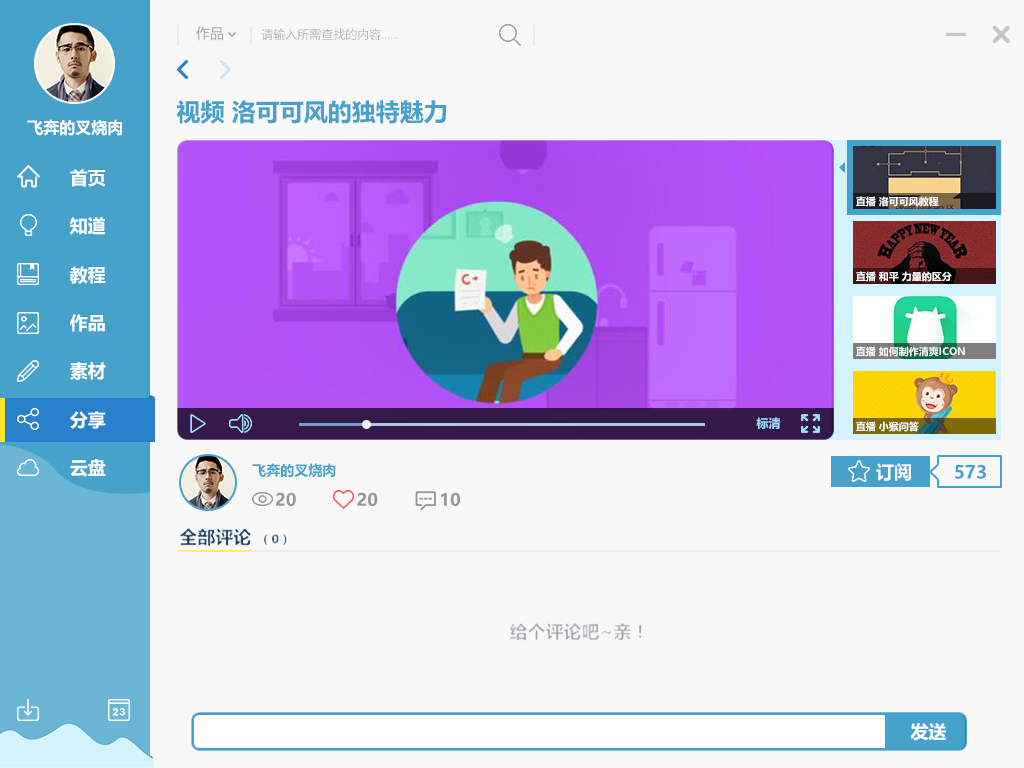
<style>
.page{position:relative;width:1024px;height:768px;background:#f8f8f8}
.page>*{position:absolute;margin:0}
.t1{font:14px "MicrosoftYaHei";color:#a3a3a3}
.t2{font:12px "MicrosoftYaHeiLight";color:#a3a3a3}
.t3{font:24px "MicrosoftYaHei-Bold";color:#46a2cb}
.t4{font:16px "MicrosoftYaHei-Bold";color:#ffffff}
.t5{font:18px "MicrosoftYaHei-Bold";color:#ffffff}
.t6{font:10px "MicrosoftYaHei-Bold";color:#ffffff}
.t7{font:12px "MicrosoftYaHei-Bold";color:#9be0ff}
.t8{font:14px "MicrosoftYaHei-Bold";color:#46a2cb}
.t9{font:18px "MicrosoftYaHei-Bold";color:#f8f8f8}
.t10{font:18px "MicrosoftYaHei-Bold";color:#46a2cb}
.t11{font:17.1px "MicrosoftYaHei-Bold";color:#979799}
.t12{font:18px "MicrosoftYaHei-Bold"}
.t13{font:12px "MicrosoftYaHei-Bold"}
.t14{font:18px "MicrosoftYaHei-Bold";color:#b0b0b0}
</style>
<div class="page">
<p class="t1" style="left:196px;top:26px;width:27px;height:15px">作品</p>
<p class="t2" style="left:261px;top:28px;width:137px;height:12px">请输入所需查找的内容……</p>
<p class="t3" style="left:177px;top:100px;width:270px;height:24px">视频 洛可可风的独特魅力</p>
<p class="t4" style="left:27px;top:119px;width:95px;height:17px">飞奔的叉烧肉</p>
<p class="t5" style="left:70px;top:169px;width:36px;height:18px">首页</p>
<p class="t6" style="left:856px;top:196px;width:83px;height:11px">直播 洛可可风教程</p>
<p class="t5" style="left:70px;top:217px;width:36px;height:18px">知道</p>
<p class="t5" style="left:70px;top:266px;width:36px;height:18px">教程</p>
<p class="t6" style="left:856px;top:271px;width:96px;height:11px">直播 和平 力量的区分</p>
<p class="t5" style="left:70px;top:314px;width:35px;height:18px">作品</p>
<p class="t6" style="left:856px;top:346px;width:109px;height:11px">直播 如何制作清爽ICON</p>
<p class="t5" style="left:70px;top:362px;width:36px;height:18px">素材</p>
<p class="t5" style="left:70px;top:411px;width:36px;height:18px">分享</p>
<p class="t7" style="left:756px;top:417px;width:25px;height:12px">标清</p>
<p class="t6" style="left:856px;top:421px;width:63px;height:11px">直播 小猴问答</p>
<p class="t5" style="left:70px;top:459px;width:36px;height:18px">云盘</p>
<p class="t8" style="left:252px;top:463px;width:84px;height:15px">飞奔的叉烧肉</p>
<p class="t9" style="left:876px;top:463px;width:35px;height:18px">订阅</p>
<p class="t10" style="left:955px;top:464px;width:31px;height:15px">573</p>
<p class="t11" style="left:276px;top:492px;width:20px;height:14px">20</p>
<p class="t11" style="left:357px;top:492px;width:21px;height:14px">20</p>
<p class="t11" style="left:441px;top:492px;width:19px;height:14px">10</p>
<p class="t12" style="left:179px;top:528px;width:72px;height:18px">全部评论</p>
<p class="t13" style="left:264px;top:534px;width:23px;height:12px">（0）</p>
<p class="t14" style="left:509px;top:623px;width:133px;height:18px">给个评论吧~亲！</p>
<p class="t5" style="left:910px;top:723px;width:37px;height:18px">发送</p>
</div>
